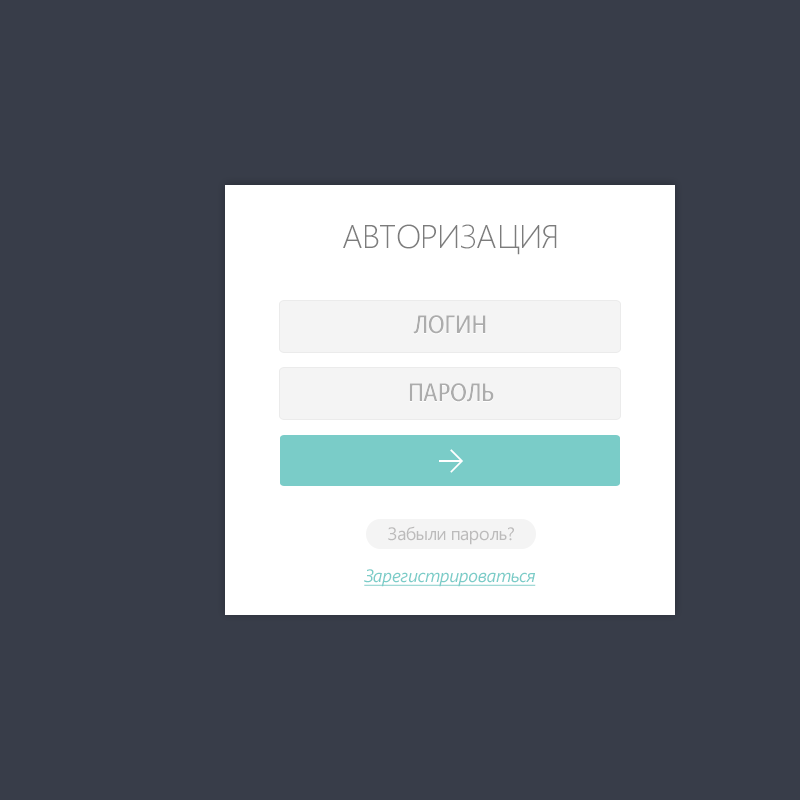
<style>
.page{position:relative;width:800px;height:800px;background:#383d49}
.page>*{position:absolute;margin:0}
.t1{font:33px "SegoeUI-Light";letter-spacing:-0.025em;color:#7c7c7c;text-transform:uppercase}
.t2{font:26.4px "SegoeUI-Semibold";letter-spacing:-0.025em;color:#acacac;text-transform:uppercase;scale:0.83 1}
.t3{font:18px/36px "SegoeUI";letter-spacing:-0.025em;color:#bcbbbb}
.t4{font:18px "SegoeUI-Italic";letter-spacing:-0.025em;color:#7accc8;text-decoration:underline}
</style>
<div class="page">
<p class="t1" style="left:343px;top:224px;width:214px;height:31px">Авторизация</p>
<p class="t2" style="left:413px;top:315px;width:73px;height:20px">ЛОГИН</p>
<p class="t2" style="left:409px;top:383px;width:85px;height:20px">Пароль</p>
<p class="t3" style="left:388px;top:526px;width:126px;height:19px;text-align:center">Забыли пароль?<br>sdff</p>
<p class="t4" style="left:364px;top:569px;width:172px;height:18px">Зарегистрироваться</p>
</div>
